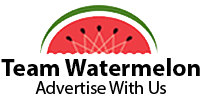
<style>
.page{position:relative;width:200px;height:100px;background:#ffffff}
.page>*{position:absolute;margin:0}
.t1{font:25px "MyriadPro-Bold";color:#000000}
.t2{font:18px "MyriadPro-Regular";color:#000000}
</style>
<div class="page">
<p class="t1" style="left:1px;top:58px;width:199px;height:18px">Team Watermelon</p>
<p class="t2" style="left:35px;top:81px;width:131px;height:13px">Advertise With Us</p>
</div>
